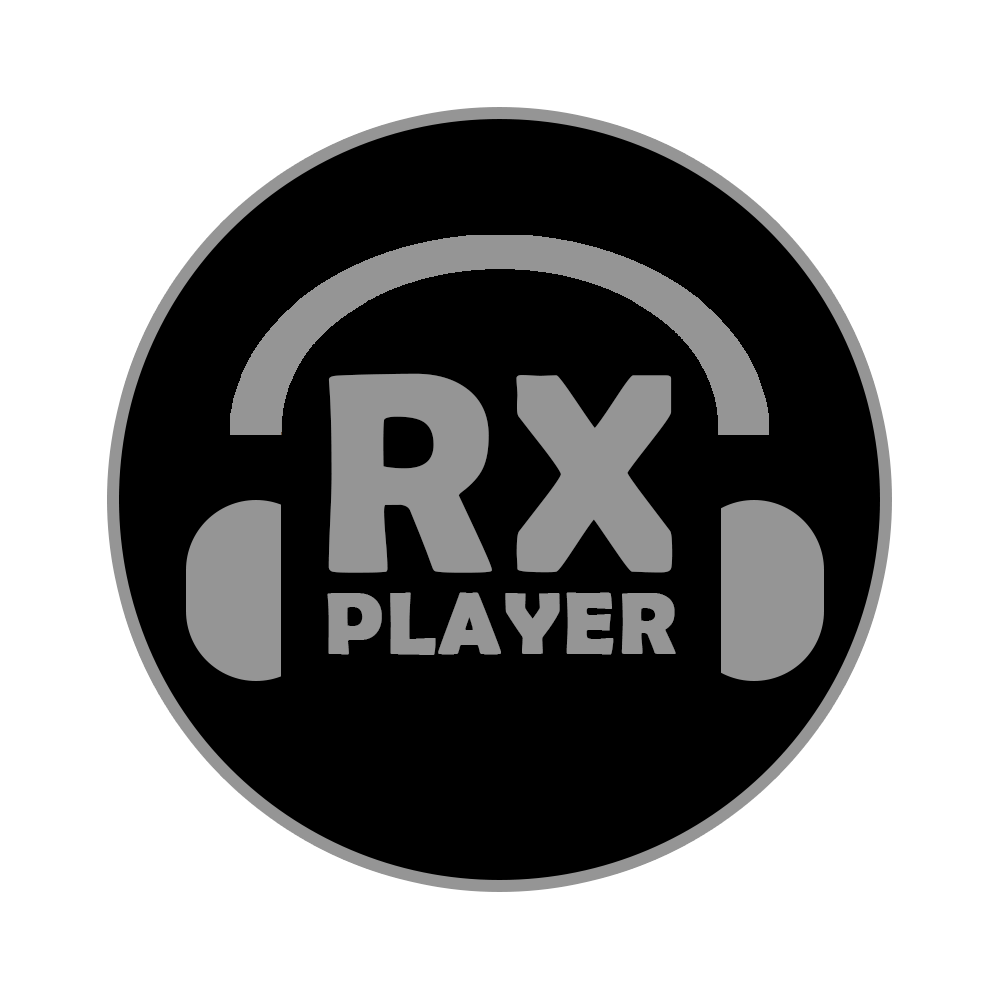
<style>
.page{position:relative;width:1000px;height:1000px;background:#ffffff}
.page>*{position:absolute;margin:0}
.t1{font:284.7px "BerlinSansFBDemi-Bold";letter-spacing:0.025em;color:#959595;font-weight:bold}
.t2{font:87.3px "BerlinSansFBDemi-Bold";letter-spacing:0.025em;color:#959595;font-weight:bold}
</style>
<div class="page">
<p class="t1" style="left:328px;top:373px;width:345px;height:200px">RX</p>
<p class="t2" style="left:327px;top:592px;width:349px;height:63px">PLAYER</p>
</div>
